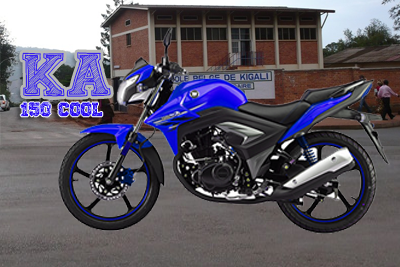
<style>
.page{position:relative;width:400px;height:267px}
.page>*{position:absolute;margin:0}
.t1{font:61.3px "FineCollege";color:#2b09f1}
.t2{font:19.1px "FineCollege";color:#2b09f1}
</style>
<div class="page">
<p class="t1" style="left:22px;top:52px;width:89px;height:45px">KA</p>
<p class="t2" style="left:20px;top:102px;width:31px;height:15px">150</p>
<p class="t2" style="left:58px;top:102px;width:45px;height:15px">cOOL</p>
</div>
